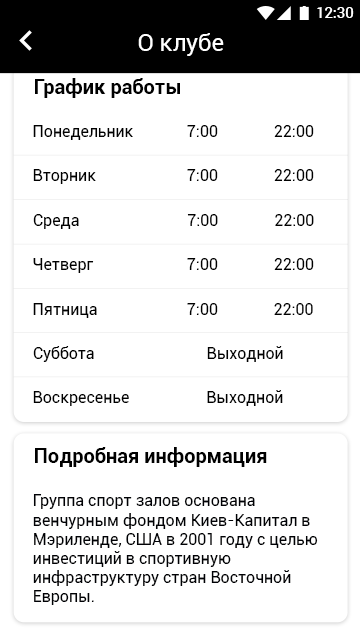
<style>
.page{position:relative;width:360px;height:640px;background:#ffffff}
.page>*{position:absolute;margin:0}
.t1{font:14.7px "Roboto-Medium";color:#ffffff}
.t2{font:24px "Roboto-Regular";color:#ffffff}
.t3{font:20px "Roboto-Bold";color:#000000}
.t4{font:16px "Roboto-Regular";color:#000000}
</style>
<div class="page">
<p class="t1" style="left:317px;top:7px;width:37px;height:11px">12:30</p>
<p class="t2" style="left:138px;top:33px;width:86px;height:23px">О клубе</p>
<p class="t3" style="left:35px;top:78px;width:145px;height:20px">График работы</p>
<p class="t4" style="left:33px;top:125px;width:100px;height:15px">Понедельник</p>
<p class="t4" style="left:187px;top:125px;width:31px;height:12px">7:00</p>
<p class="t4" style="left:274px;top:125px;width:40px;height:12px">22:00</p>
<p class="t4" style="left:33px;top:169px;width:63px;height:15px">Вторник</p>
<p class="t4" style="left:187px;top:169px;width:31px;height:12px">7:00</p>
<p class="t4" style="left:274px;top:169px;width:40px;height:12px">22:00</p>
<p class="t4" style="left:33px;top:214px;width:46px;height:15px">Среда</p>
<p class="t4" style="left:187px;top:214px;width:31px;height:12px">7:00</p>
<p class="t4" style="left:275px;top:214px;width:39px;height:12px">22:00</p>
<p class="t4" style="left:33px;top:258px;width:61px;height:15px">Четверг</p>
<p class="t4" style="left:187px;top:258px;width:31px;height:12px">7:00</p>
<p class="t4" style="left:274px;top:258px;width:40px;height:12px">22:00</p>
<p class="t4" style="left:33px;top:303px;width:64px;height:15px">Пятница</p>
<p class="t4" style="left:187px;top:303px;width:31px;height:12px">7:00</p>
<p class="t4" style="left:274px;top:303px;width:39px;height:12px">22:00</p>
<p class="t4" style="left:33px;top:346px;width:61px;height:16px">Суббота</p>
<p class="t4" style="left:207px;top:346px;width:76px;height:16px">Выходной</p>
<p class="t4" style="left:207px;top:390px;width:76px;height:16px">Выходной</p>
<p class="t4" style="left:33px;top:391px;width:96px;height:15px">Воскресенье</p>
<p class="t3" style="left:35px;top:447px;width:232px;height:20px">Подробная информация</p>
<p class="t4" style="left:33px;top:494px;width:285px;height:111px">Группа спорт залов основана венчурным фондом Киев-Капитал в Мэриленде, США в 2001 году с целью инвестиций в спортивную инфраструктуру стран Восточной Европы.</p>
</div>
